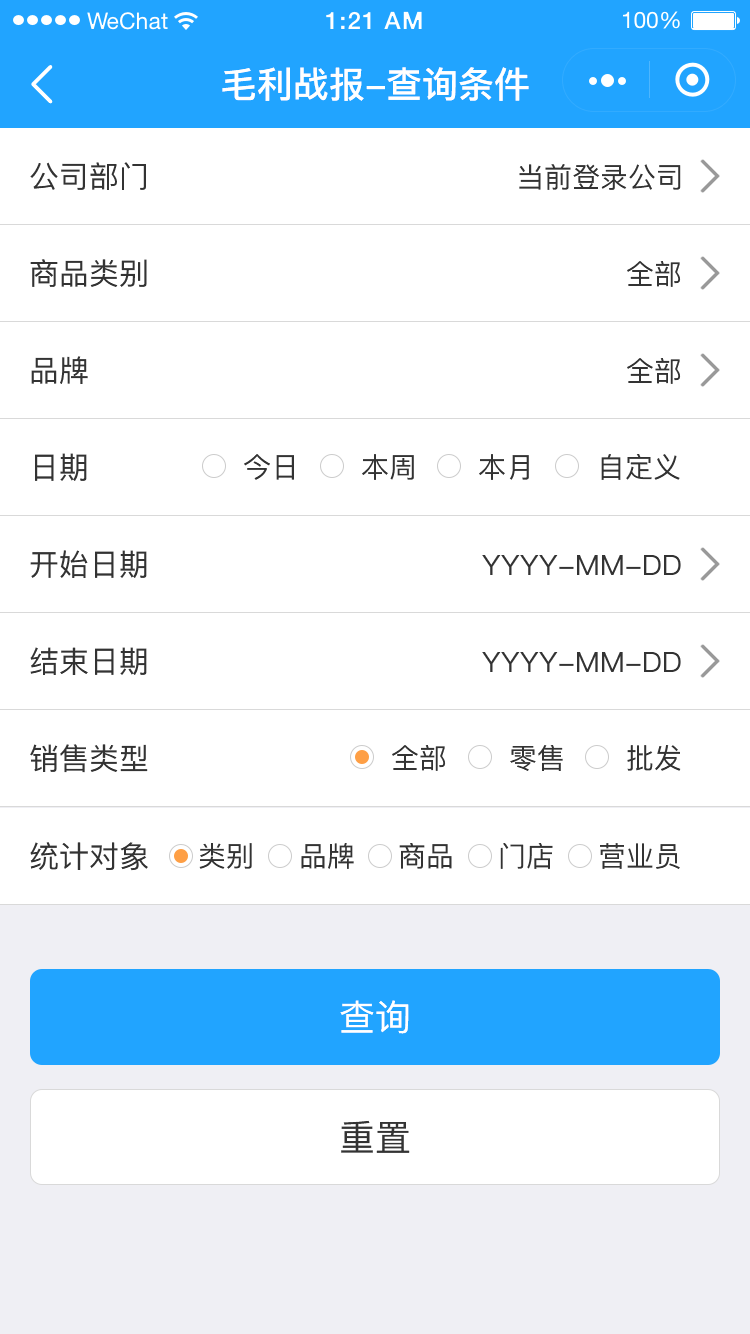
<style>
.page{position:relative;width:750px;height:1334px;background:#ffffff}
.page>*{position:absolute;margin:0}
.t1{font:36px "PingFang-SC-Bold";color:#ffffff}
.t2{font:30px "PingFang-SC-Medium";color:#333333}
.t3{font:28px "PingFang-SC-Medium";color:#333333}
.t4{font:36px "PingFang-SC-Medium";color:#ffffff}
.t5{font:36px "PingFang-SC-Medium";color:#333333}
</style>
<div class="page">
<p class="t1" style="left:222px;top:67px;width:307px;height:34px">毛利战报-查询条件</p>
<p class="t2" style="left:30px;top:162px;width:116px;height:28px">公司部门</p>
<p class="t3" style="left:519px;top:164px;width:162px;height:26px">当前登录公司</p>
<p class="t2" style="left:30px;top:259px;width:117px;height:28px">商品类别</p>
<p class="t3" style="left:627px;top:261px;width:54px;height:26px">全部</p>
<p class="t2" style="left:31px;top:356px;width:57px;height:28px">品牌</p>
<p class="t3" style="left:627px;top:358px;width:54px;height:26px">全部</p>
<p class="t2" style="left:35px;top:453px;width:52px;height:28px">日期</p>
<p class="t3" style="left:244px;top:454px;width:50px;height:26px">今日</p>
<p class="t3" style="left:362px;top:454px;width:52px;height:26px">本周</p>
<p class="t3" style="left:479px;top:454px;width:50px;height:26px">本月</p>
<p class="t3" style="left:601px;top:454px;width:79px;height:26px">自定义</p>
<p class="t2" style="left:30px;top:550px;width:117px;height:28px">开始日期</p>
<p class="t3" style="left:482px;top:555px;width:199px;height:20px">YYYY-MM-DD</p>
<p class="t2" style="left:30px;top:647px;width:117px;height:28px">结束日期</p>
<p class="t3" style="left:482px;top:652px;width:199px;height:20px">YYYY-MM-DD</p>
<p class="t2" style="left:30px;top:744px;width:118px;height:29px">销售类型</p>
<p class="t3" style="left:392px;top:745px;width:54px;height:26px">全部</p>
<p class="t3" style="left:510px;top:745px;width:53px;height:26px">零售</p>
<p class="t3" style="left:627px;top:745px;width:54px;height:26px">批发</p>
<p class="t2" style="left:30px;top:842px;width:118px;height:29px">统计对象</p>
<p class="t3" style="left:199px;top:843px;width:53px;height:26px">类别</p>
<p class="t3" style="left:301px;top:843px;width:53px;height:26px">品牌</p>
<p class="t3" style="left:399px;top:843px;width:53px;height:26px">商品</p>
<p class="t3" style="left:500px;top:843px;width:53px;height:26px">门店</p>
<p class="t3" style="left:600px;top:843px;width:80px;height:26px">营业员</p>
<p class="t4" style="left:340px;top:1000px;width:69px;height:34px">查询</p>
<p class="t5" style="left:341px;top:1120px;width:69px;height:33px">重置</p>
</div>
